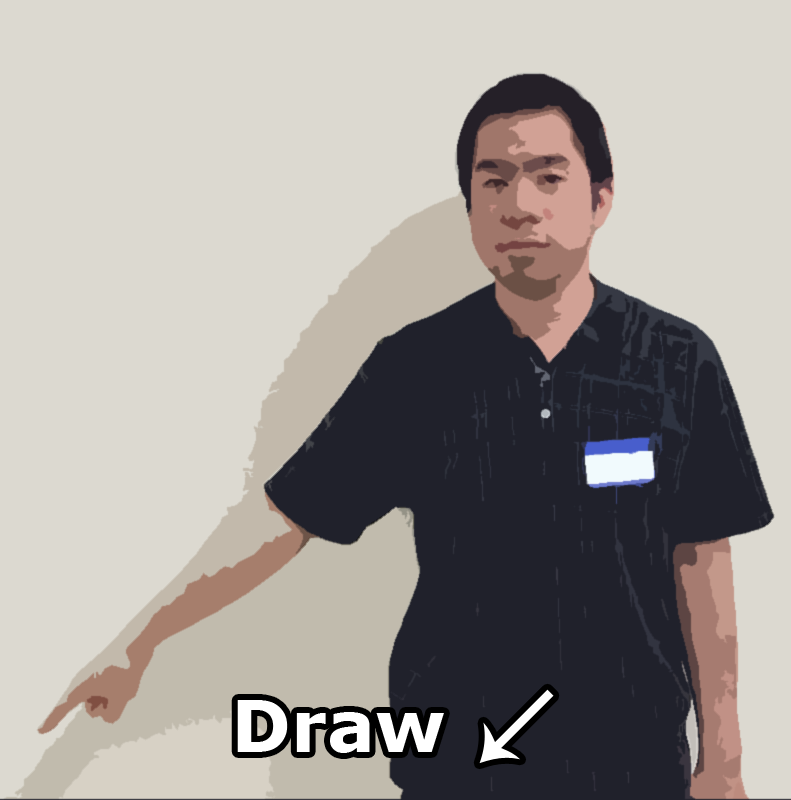
<style>
.page{position:relative;width:791px;height:800px;background:#dcd9d0}
.page>*{position:absolute;margin:0}
.t1{font:72px "Verdana-Bold";color:#ffffff}
</style>
<div class="page">
<p class="t1" style="left:237px;top:700px;width:207px;height:53px">Draw</p>
</div>
